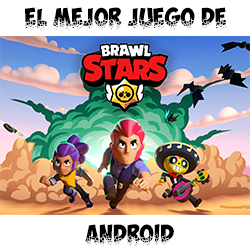
<style>
.page{position:relative;width:250px;height:250px;background:#ffffff}
.page>*{position:absolute;margin:0}
.t1{font:18px "ObelixProBroken";letter-spacing:0.002em;color:#000000}
.t2{font:17.6px "ObelixProBroken";letter-spacing:0.002em;color:#000000}
</style>
<div class="page">
<p class="t1" style="left:25px;top:7px;width:201px;height:25px">El mejor juego de</p>
<p class="t2" style="left:85px;top:224px;width:89px;height:22px">Android</p>
</div>
